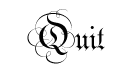
<style>
.page{position:relative;width:135px;height:79px;background:#ffffff}
.page>*{position:absolute;margin:0}
.t1{font:60px "Parchment-Regular";color:#020202}
</style>
<div class="page">
<p class="t1" style="left:27px;top:9px;width:78px;height:55px">Quit</p>
</div>
